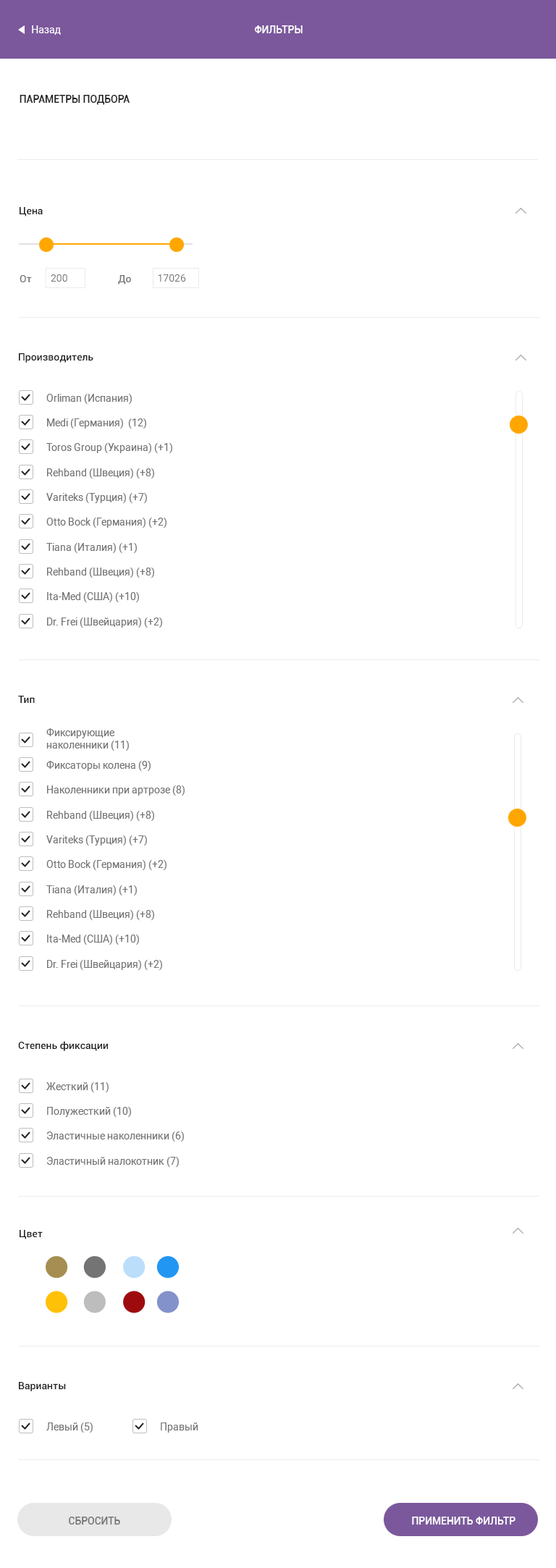
<style>
.page{position:relative;width:556px;height:1568px;background:#ffffff}
.page>*{position:absolute;margin:0}
.t1{font:10.1px "Roboto-Regular";color:#ffffff}
.t2{font:10.1px "Roboto-Medium";color:#ffffff;text-transform:uppercase}
.t3{font:10.1px "Roboto-Medium";color:#212121;text-transform:uppercase}
.t4{font:10.1px "Roboto-Medium";color:#212121}
.t5{font:10.1px "Roboto-Medium";color:#757575}
.t6{font:10.1px "Roboto-Regular";color:#757575}
.t7{font:10.1px "Roboto-Medium";color:#757575;text-transform:uppercase}
</style>
<div class="page">
<p class="t1" style="left:32px;top:25px;width:29px;height:10px">Назад</p>
<p class="t2" style="left:254px;top:25px;width:49px;height:8px">Фильтры</p>
<p class="t3" style="left:20px;top:95px;width:110px;height:10px">Параметры подбора</p>
<p class="t4" style="left:20px;top:207px;width:23px;height:9px">Цена</p>
<p class="t5" style="left:20px;top:275px;width:12px;height:7px">От</p>
<p class="t6" style="left:51px;top:274px;width:16px;height:8px">200</p>
<p class="t5" style="left:118px;top:275px;width:13px;height:9px">До</p>
<p class="t6" style="left:158px;top:274px;width:28px;height:8px">17026</p>
<p class="t4" style="left:19px;top:353px;width:74px;height:10px">Производитель</p>
<p class="t6" style="left:46px;top:393px;width:86px;height:12px">Orliman (Испания)</p>
<p class="t6" style="left:47px;top:418px;width:99px;height:11px">Medi (Германия)  (12)</p>
<p class="t6" style="left:46px;top:442px;width:126px;height:12px">Toros Group (Украина) (+1)</p>
<p class="t6" style="left:47px;top:468px;width:107px;height:11px">Rehband (Швеция) (+8)</p>
<p class="t6" style="left:46px;top:492px;width:101px;height:12px">Variteks (Турция) (+7)</p>
<p class="t6" style="left:46px;top:517px;width:121px;height:11px">Otto Bock (Германия) (+2)</p>
<p class="t6" style="left:46px;top:542px;width:91px;height:12px">Tiana (Италия) (+1)</p>
<p class="t6" style="left:47px;top:567px;width:107px;height:11px">Rehband (Швеция) (+8)</p>
<p class="t6" style="left:47px;top:591px;width:92px;height:12px">Ita-Med (США) (+10)</p>
<p class="t6" style="left:47px;top:617px;width:115px;height:11px">Dr. Frei (Швейцария) (+2)</p>
<p class="t4" style="left:18px;top:696px;width:17px;height:7px">Тип</p>
<p class="t6" style="left:46px;top:728px;width:83px;height:23px">Фиксирующие <br>наколенники (11)</p>
<p class="t6" style="left:46px;top:760px;width:105px;height:12px">Фиксаторы колена (9)</p>
<p class="t6" style="left:47px;top:785px;width:138px;height:11px">Наколенники при артрозе (8)</p>
<p class="t6" style="left:47px;top:810px;width:107px;height:12px">Rehband (Швеция) (+8)</p>
<p class="t6" style="left:46px;top:835px;width:101px;height:11px">Variteks (Турция) (+7)</p>
<p class="t6" style="left:46px;top:859px;width:121px;height:12px">Otto Bock (Германия) (+2)</p>
<p class="t6" style="left:46px;top:885px;width:91px;height:11px">Tiana (Италия) (+1)</p>
<p class="t6" style="left:47px;top:909px;width:107px;height:12px">Rehband (Швеция) (+8)</p>
<p class="t6" style="left:47px;top:934px;width:92px;height:11px">Ita-Med (США) (+10)</p>
<p class="t6" style="left:47px;top:959px;width:115px;height:12px">Dr. Frei (Швейцария) (+2)</p>
<p class="t4" style="left:18px;top:1041px;width:90px;height:10px">Степень фиксации</p>
<p class="t6" style="left:46px;top:1082px;width:63px;height:11px">Жесткий (11)</p>
<p class="t6" style="left:47px;top:1106px;width:84px;height:12px">Полужесткий (10)</p>
<p class="t6" style="left:46px;top:1131px;width:138px;height:11px">Эластичные наколенники (6)</p>
<p class="t6" style="left:46px;top:1156px;width:133px;height:12px">Эластичный налокотник (7)</p>
<p class="t4" style="left:20px;top:1230px;width:23px;height:9px">Цвет</p>
<p class="t4" style="left:19px;top:1382px;width:47px;height:9px">Варианты</p>
<p class="t6" style="left:46px;top:1422px;width:47px;height:11px">Левый (5)</p>
<p class="t6" style="left:161px;top:1422px;width:37px;height:11px">Правый</p>
<p class="t7" style="left:69px;top:1517px;width:51px;height:8px">Сбросить</p>
<p class="t2" style="left:412px;top:1517px;width:103px;height:8px">Применить фильтр</p>
</div>
